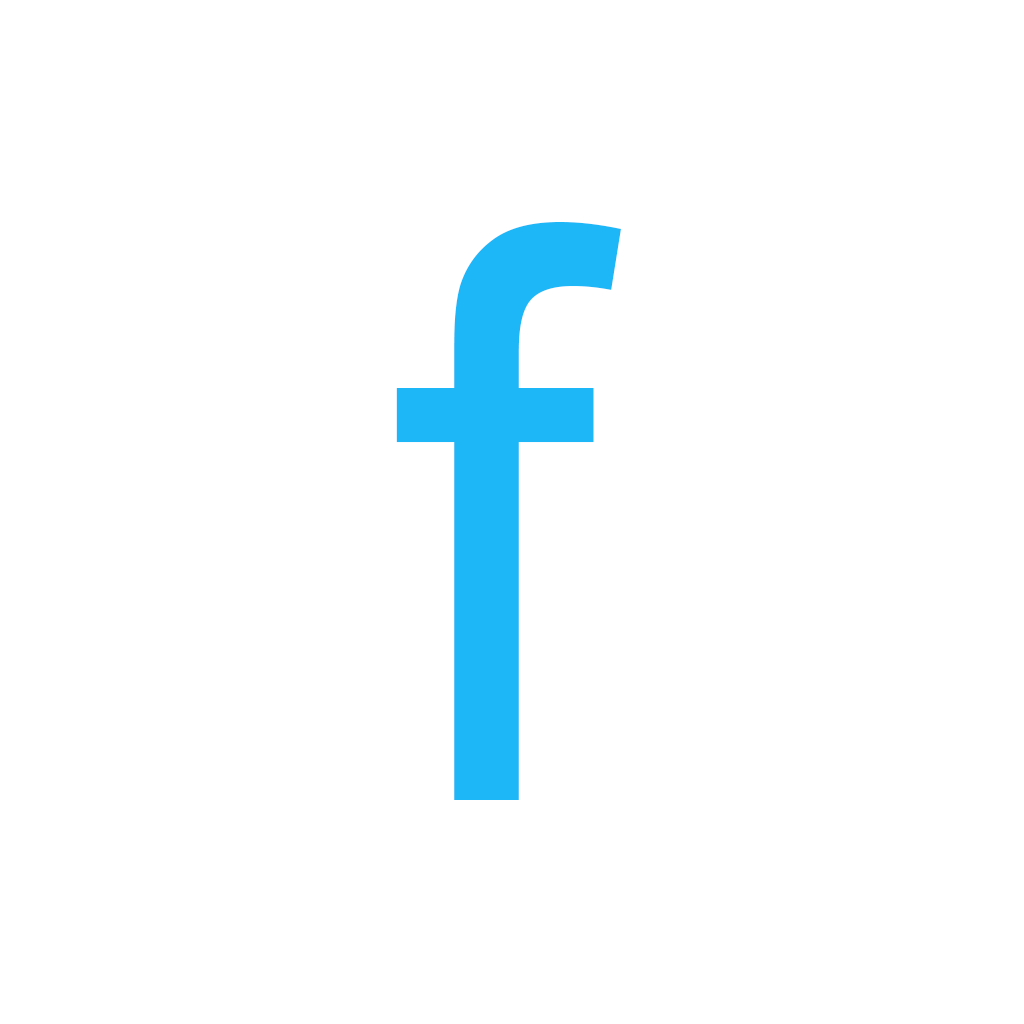
<style>
.page{position:relative;width:1024px;height:1024px;background:#ffffff}
.page>*{position:absolute;margin:0}
.t1{font:795px "ArialMT";color:#1db7f7;scale:0.93 1}
</style>
<div class="page">
<p class="t1" style="left:396px;top:222px;width:225px;height:578px">f</p>
</div>
